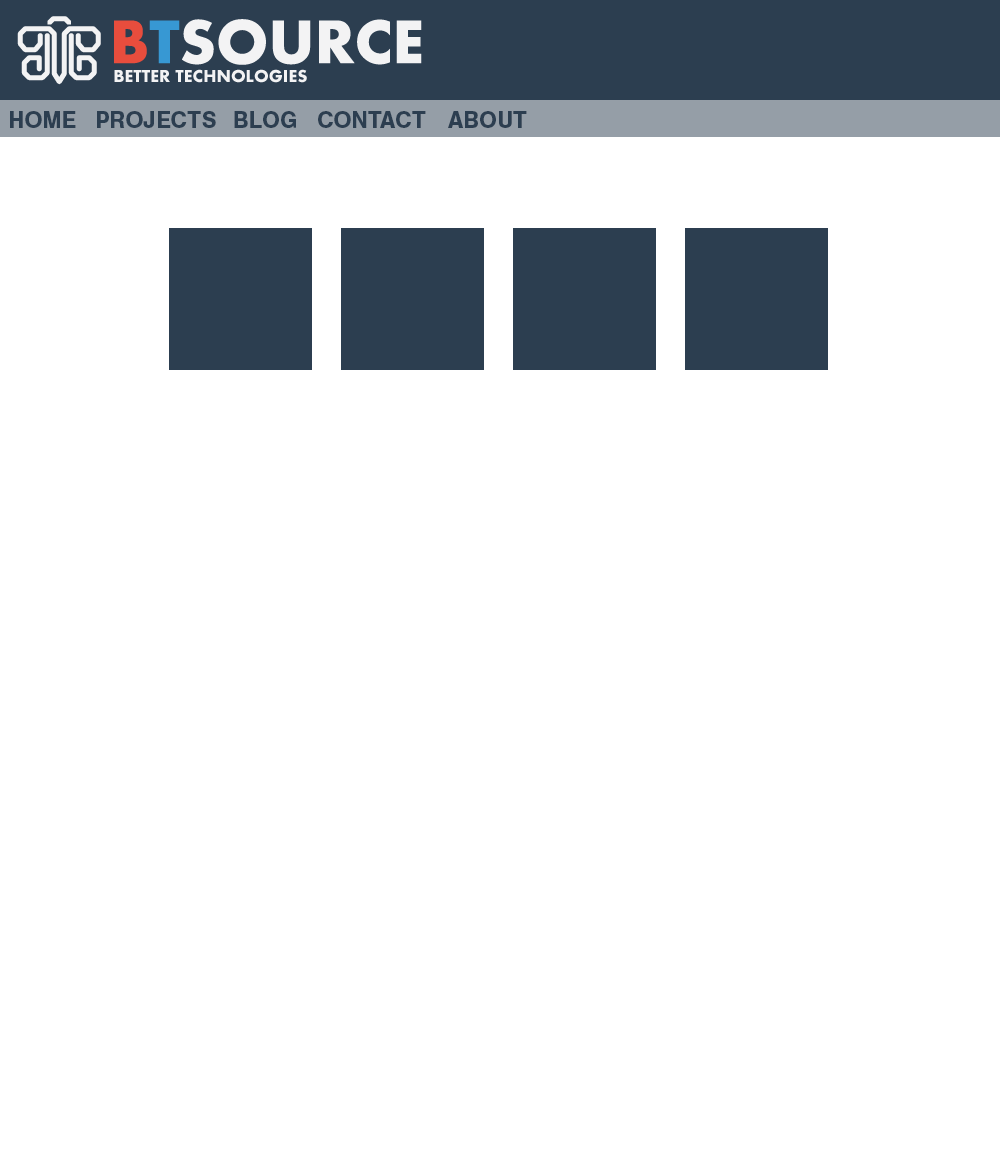
<style>
.page{position:relative;width:1000px;height:1170px;background:#ffffff}
.page>*{position:absolute;margin:0}
.t1{font:24px "NimbusSan-Bol";color:#2c3e50}
</style>
<div class="page">
<p class="t1" style="left:10px;top:111px;width:66px;height:17px">HOME</p>
<p class="t1" style="left:97px;top:111px;width:119px;height:17px">PROJECTS</p>
<p class="t1" style="left:234px;top:111px;width:62px;height:17px">BLOG</p>
<p class="t1" style="left:318px;top:111px;width:108px;height:17px">CONTACT</p>
<p class="t1" style="left:448px;top:111px;width:79px;height:17px">ABOUT</p>
</div>
